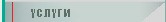
<style>
.page{position:relative;width:166px;height:22px;background:#c8d4d0}
.page>*{position:absolute;margin:0}
.t1{font:12px "Impact";letter-spacing:0.1em;color:#5b7066}
</style>
<div class="page">
<p class="t1" style="left:31px;top:9px;width:39px;height:9px">услуги</p>
</div>
